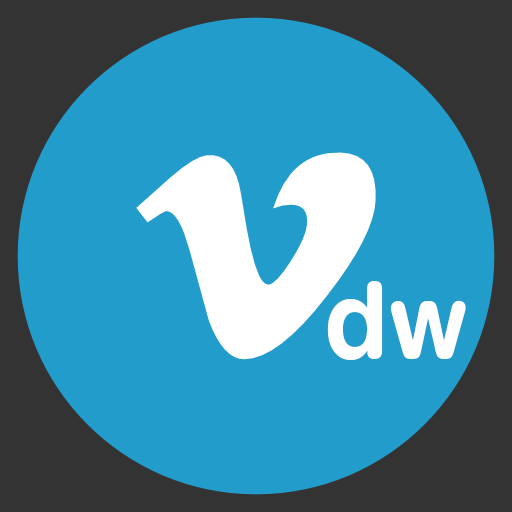
<style>
.page{position:relative;width:512px;height:512px;background:#229ccb}
.page>*{position:absolute;margin:0}
.t1{font:105px "Swiss721BT-BoldRounded";color:#ffffff}
</style>
<div class="page">
<p class="t1" style="left:327px;top:281px;width:139px;height:79px">dw</p>
</div>
